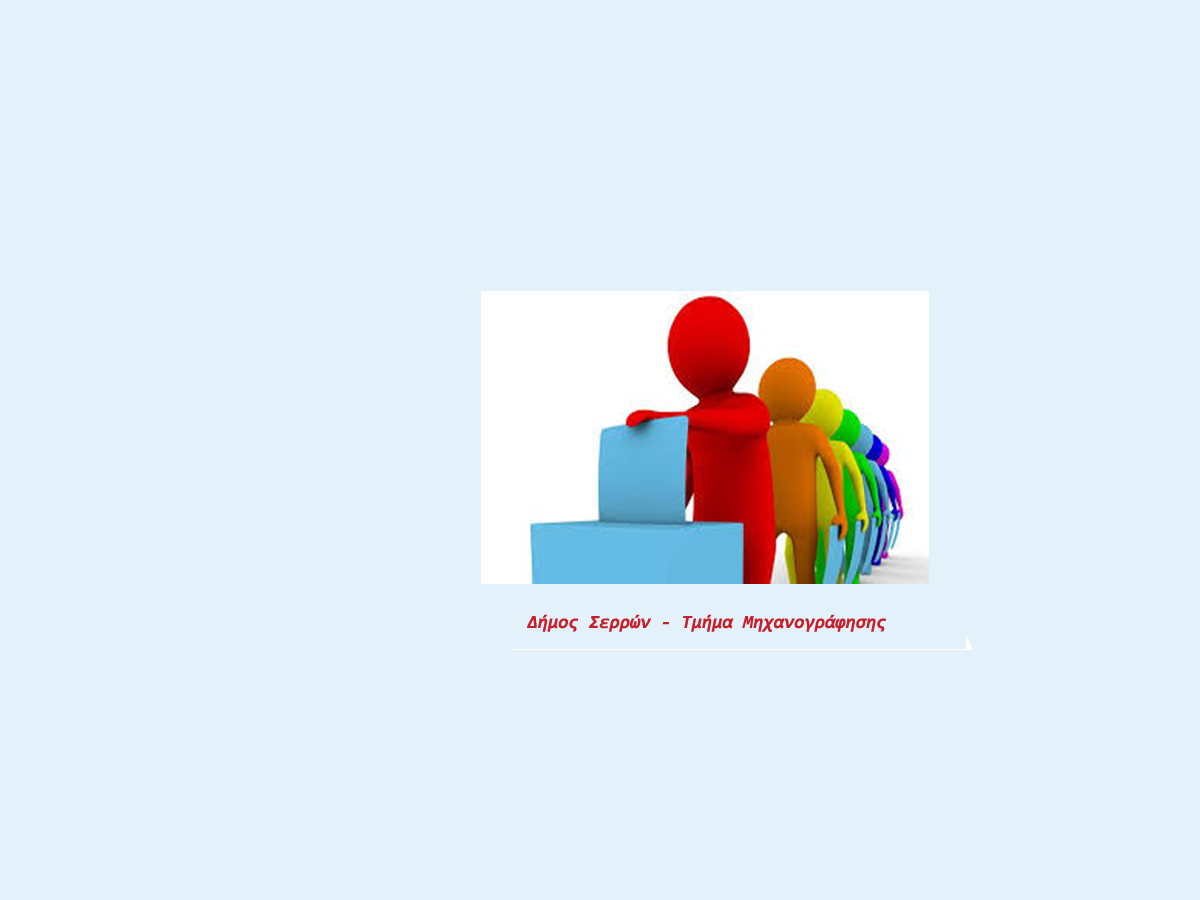
<style>
.page{position:relative;width:1200px;height:900px;background:#e3f1fa}
.page>*{position:absolute;margin:0}
.t1{font:18.7px "Consolas-BoldItalic";color:#c81f2b}
</style>
<div class="page">
<p class="t1" style="left:527px;top:614px;width:359px;height:18px">Δήμος Σερρών - Τμήμα Μηχανογράφησης</p>
</div>
